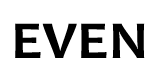
<style>
.page{position:relative;width:160px;height:80px;background:#ffffff}
.page>*{position:absolute;margin:0}
.t1{font:54px "Candara-Bold";color:#000000;scale:1.11 1}
</style>
<div class="page">
<p class="t1" style="left:15px;top:23px;width:130px;height:35px">EVEN</p>
</div>
